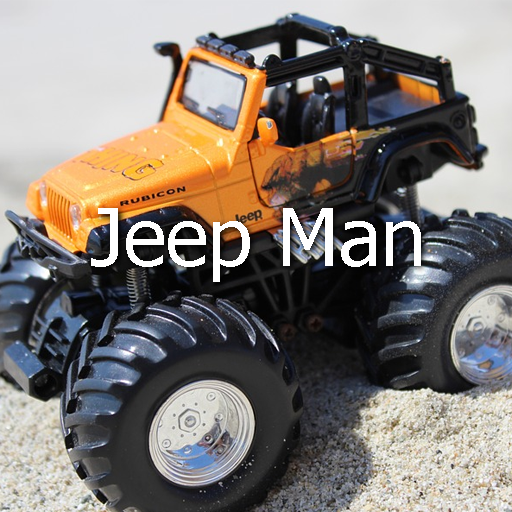
<style>
.page{position:relative;width:512px;height:512px}
.page>*{position:absolute;margin:0}
.t1{font:80px "Tahoma";color:#ffffff}
</style>
<div class="page">
<p class="t1" style="left:91px;top:208px;width:330px;height:74px">Jeep Man</p>
</div>
